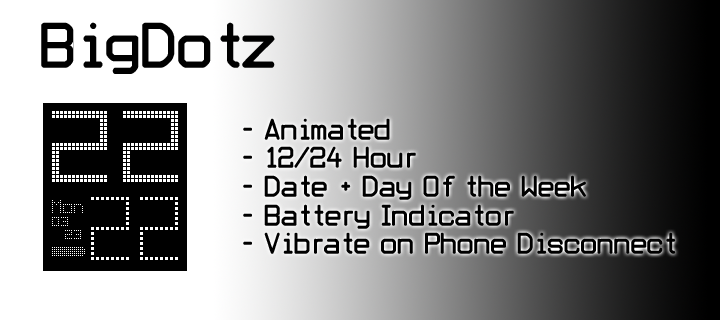
<style>
.page{position:relative;width:720px;height:320px}
.page>*{position:absolute;margin:0}
.t1{font:51.2px "Obliviousfont";color:#000000}
.t2{font:23.9px "Obliviousfont";color:#000000}
</style>
<div class="page">
<p class="t1" style="left:41px;top:22px;width:234px;height:52px">BigDotz</p>
<p class="t2" style="left:243px;top:118px;width:433px;height:136px">- Animated<br>- 12/24 Hour <br>- Date + Day Of the Week<br>- Battery Indicator<br>- Vibrate on Phone Disconnect</p>
</div>
